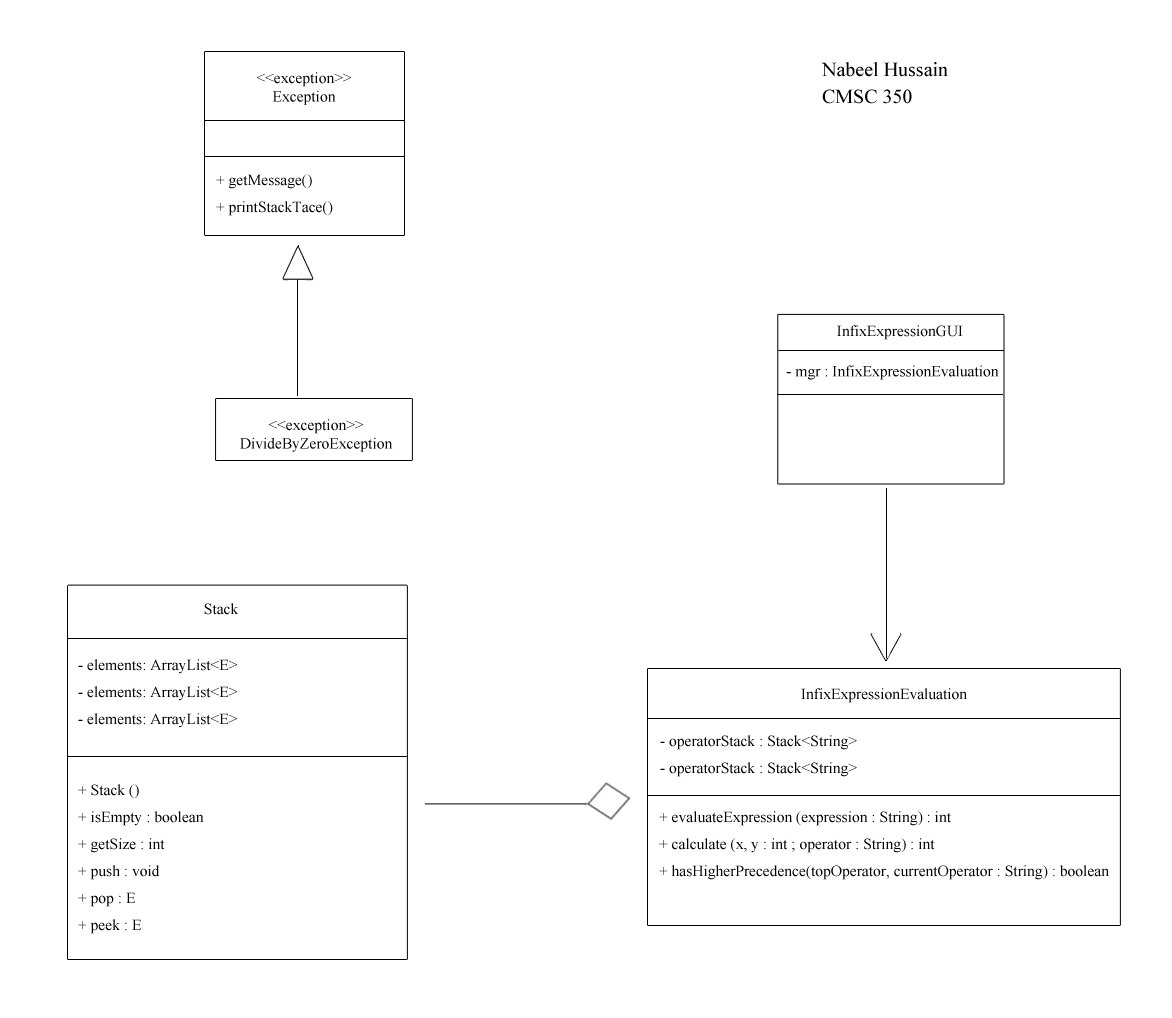
<style>
.page{position:relative;width:1172px;height:1018px;background:#ffffff}
.page>*{position:absolute;margin:0}
.t1{font:20px/27px "TimesNewRomanPSMT";color:#000000}
.t2{font:15.5px "TimesNewRomanPSMT";color:#000000}
.t3{font:15.5px/27px "TimesNewRomanPSMT";color:#000000}
</style>
<div class="page">
<p class="t1" style="left:821px;top:62px;width:127px;height:42px">Nabeel Hussain<br>CMSC 350</p>
<p class="t2" style="left:256px;top:72px;width:96px;height:33px;text-align:center">&lt;&lt;exception&gt;&gt;<br>Exception</p>
<p class="t3" style="left:216px;top:174px;width:117px;height:42px">+ getMessage()<br>+ printStackTace()</p>
<p class="t2" style="left:837px;top:325px;width:126px;height:15px">InfixExpressionGUI</p>
<p class="t2" style="left:786px;top:365px;width:213px;height:15px">- mgr : InfixExpressionEvaluation</p>
<p class="t2" style="left:240px;top:419px;width:153px;height:33px;text-align:center">&lt;&lt;exception&gt;&gt;<br>DivideByZeroException</p>
<p class="t2" style="left:204px;top:603px;width:35px;height:12px">Stack</p>
<p class="t3" style="left:78px;top:659px;width:160px;height:69px">- elements: ArrayList&lt;E&gt;<br>- elements: ArrayList&lt;E&gt;<br>- elements: ArrayList&lt;E&gt;</p>
<p class="t2" style="left:801px;top:688px;width:166px;height:15px">InfixExpressionEvaluation</p>
<p class="t3" style="left:660px;top:735px;width:197px;height:42px">- operatorStack : Stack&lt;String&gt;<br>- operatorStack : Stack&lt;String&gt;</p>
<p class="t3" style="left:78px;top:784px;width:126px;height:150px">+ Stack ()<br>+ isEmpty : boolean<br>+ getSize : int<br>+ push : void<br>+ pop : E<br>+ peek : E</p>
<p class="t3" style="left:659px;top:811px;width:450px;height:69px">+ evaluateExpression (expression : String) : int<br>+ calculate (x, y : int ; operator : String) : int<br>+ hasHigherPrecedence(topOperator, currentOperator : String) : boolean</p>
</div>
